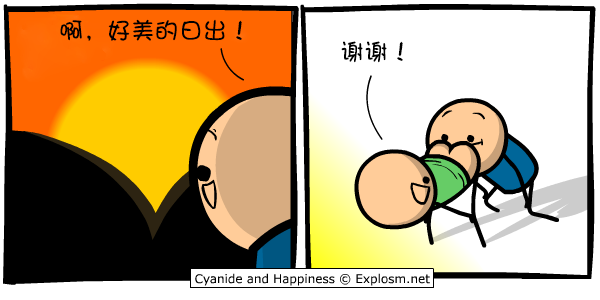
<style>
.page{position:relative;width:600px;height:300px;background:#ffffff}
.page>*{position:absolute;margin:0}
.t1{font:24px "DFPShaoNvW5";color:#000000}
</style>
<div class="page">
<p class="t1" style="left:60px;top:19px;width:182px;height:22px">啊，好美的日出！</p>
<p class="t1" style="left:341px;top:41px;width:62px;height:22px">谢谢！</p>
</div>
